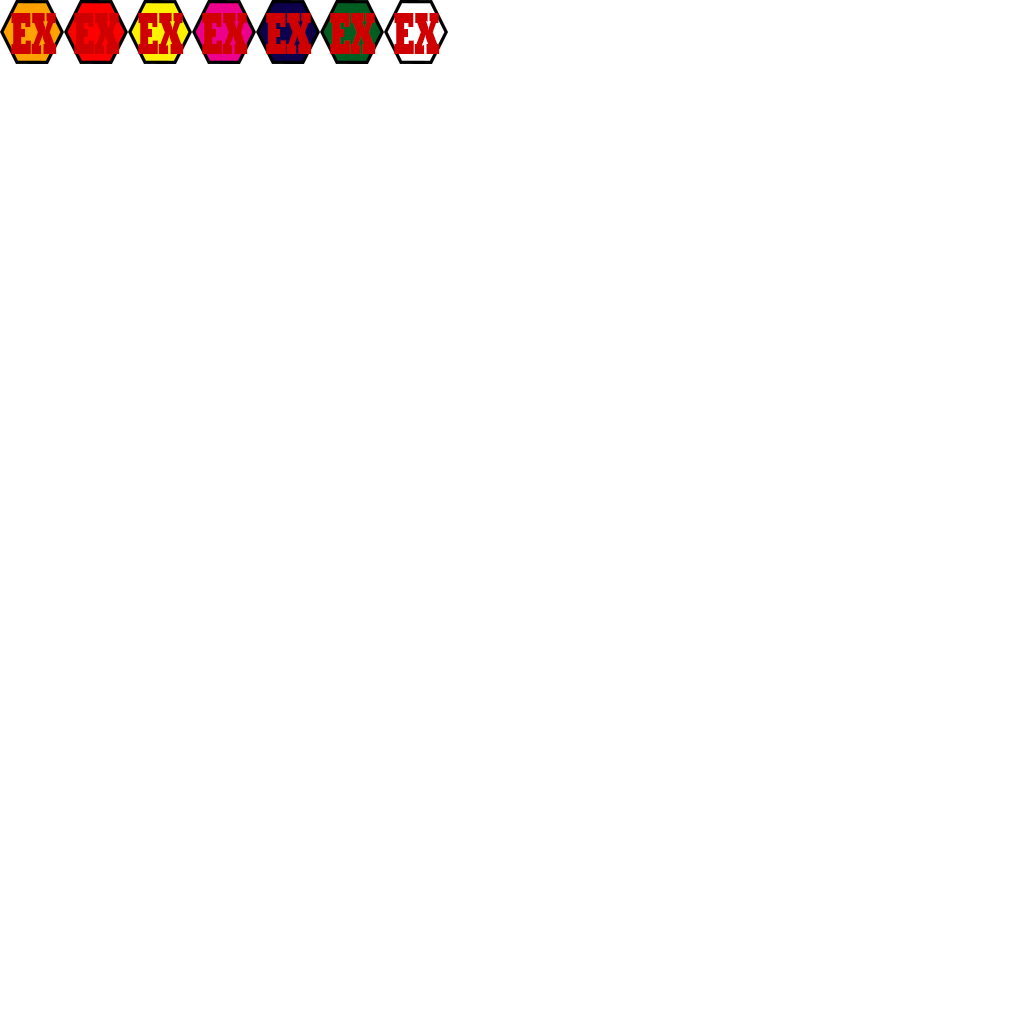
<style>
.page{position:relative;width:1024px;height:1024px;background:#ffffff}
.page>*{position:absolute;margin:0}
.t1{font:57.4px "Roland";color:#cf0000;scale:0.52 1}
</style>
<div class="page">
<p class="t1" style="left:11px;top:13px;width:46px;height:41px">EX</p>
<p class="t1" style="left:74px;top:13px;width:46px;height:41px">EX</p>
<p class="t1" style="left:138px;top:13px;width:46px;height:41px">EX</p>
<p class="t1" style="left:202px;top:13px;width:46px;height:41px">EX</p>
<p class="t1" style="left:266px;top:13px;width:46px;height:41px">EX</p>
<p class="t1" style="left:330px;top:13px;width:46px;height:41px">EX</p>
<p class="t1" style="left:394px;top:13px;width:46px;height:41px">EX</p>
</div>
